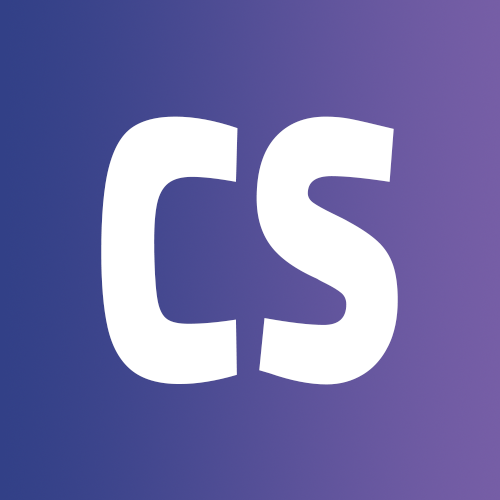
<style>
.page{position:relative;width:500px;height:500px}
.page>*{position:absolute;margin:0}
.t1{font:382.9px "Cairo-Black";color:#ffffff;scale:0.76 1}
</style>
<div class="page">
<p class="t1" style="left:101px;top:116px;width:297px;height:269px">CS</p>
</div>
